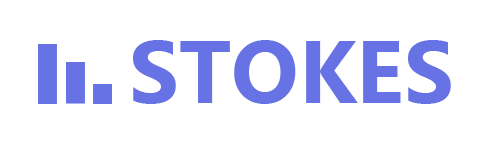
<style>
.page{position:relative;width:487px;height:144px;background:#ffffff}
.page>*{position:absolute;margin:0}
.t1{font:89px "MicrosoftTaiLe-Bold";color:#6772e5}
</style>
<div class="page">
<p class="t1" style="left:133px;top:40px;width:318px;height:64px">STOKES</p>
</div>
